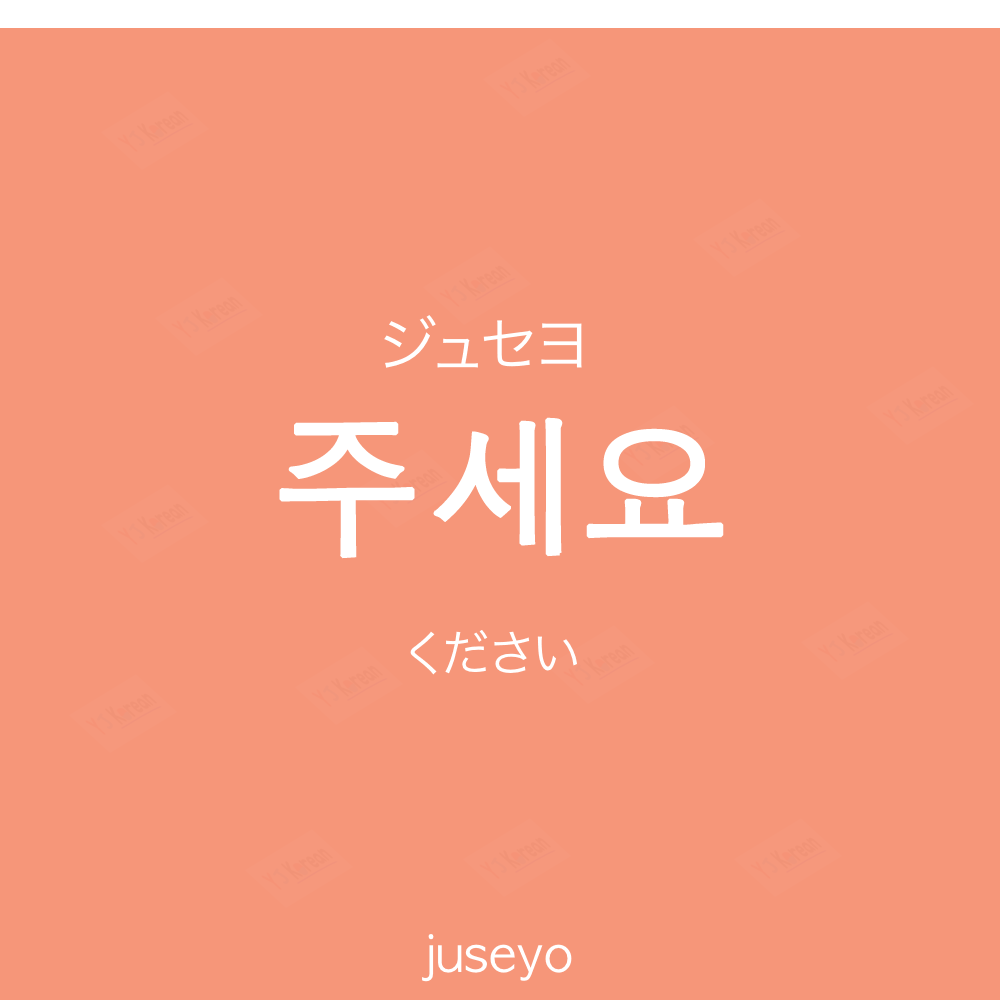
<style>
.page{position:relative;width:1000px;height:1000px;background:#f69679}
.page>*{position:absolute;margin:0}
.t1{font:60px "HiraKakuProN-W3";color:#ffffff;text-transform:uppercase}
.t2{font:150px "AppleGothic";color:#ffffff;font-weight:bold}
.t3{font:50px "HiraKakuProN-W3";color:#ffffff}
.t4{font:50px "AppleGothic";color:#ffffff}
</style>
<div class="page">
<p class="t1" style="left:384px;top:315px;width:198px;height:53px">ジュセヨ</p>
<p class="t2" style="left:279px;top:417px;width:445px;height:142px">주세요</p>
<p class="t3" style="left:410px;top:630px;width:167px;height:45px">ください</p>
<p class="t4" style="left:422px;top:934px;width:150px;height:48px">juseyo</p>
</div>
